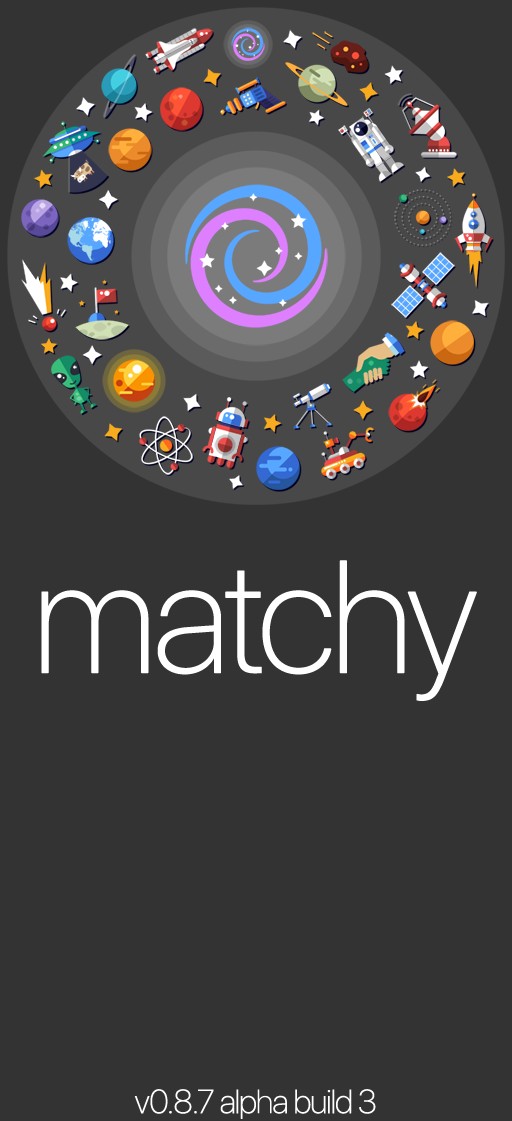
<style>
.page{position:relative;width:512px;height:1121px;background:#333333}
.page>*{position:absolute;margin:0}
.t1{font:158.3px "SFProDisplay-Thin";letter-spacing:-0.04em;color:#ffffff;font-weight:bold}
.t2{font:33.3px "SFProDisplay-Thin";letter-spacing:-0.04em;color:#ffffff;font-weight:bold}
</style>
<div class="page">
<p class="t1" style="left:41px;top:560px;width:436px;height:141px">matchy</p>
<p class="t2" style="left:134px;top:1089px;width:242px;height:30px">v0.8.7 alpha build 3</p>
</div>
